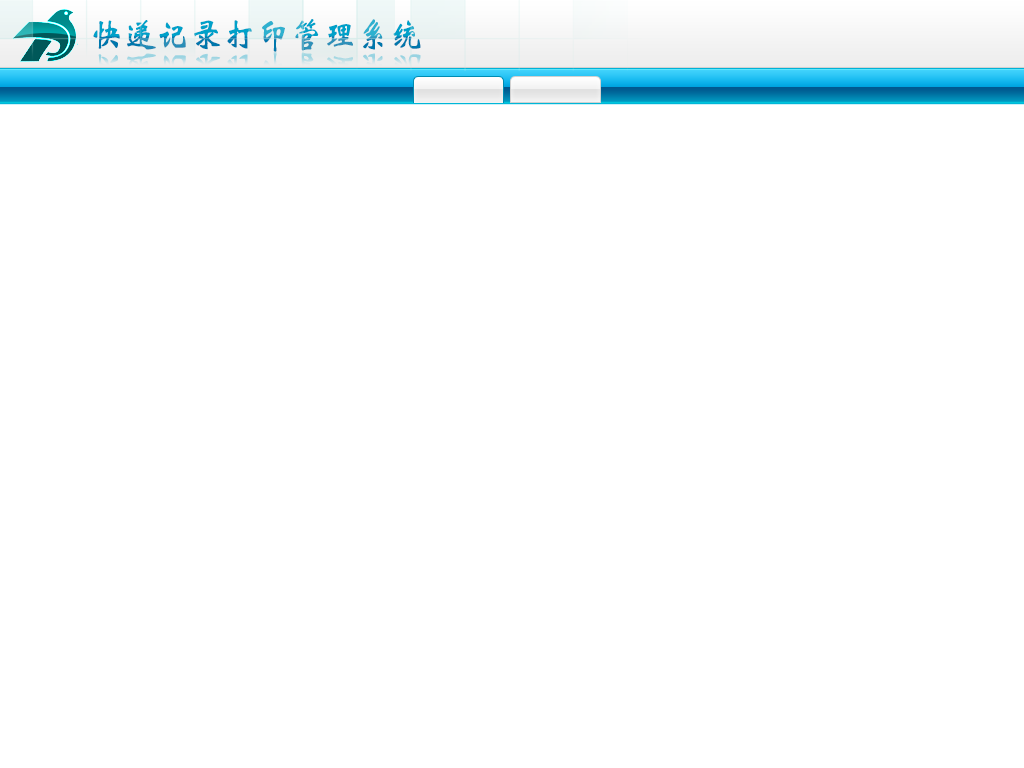
<style>
.page{position:relative;width:1024px;height:768px;background:#ffffff}
.page>*{position:absolute;margin:0}
.t1{font:36px "STXinwei";font-weight:bold;scale:0.9 1}
</style>
<div class="page">
<p class="t1" style="left:93px;top:19px;width:328px;height:33px">快递记录打印管理系统</p>
</div>
